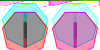
<style>
.page{position:relative;width:100px;height:50px}
.page>*{position:absolute;margin:0}
.t1{font:33.3px "MicrosoftYaHei"}
</style>
<div class="page">
<p class="t1" style="left:23px;top:12px;width:4px;height:26px">I</p>
<p class="t1" style="left:73px;top:12px;width:4px;height:26px">I</p>
</div>
